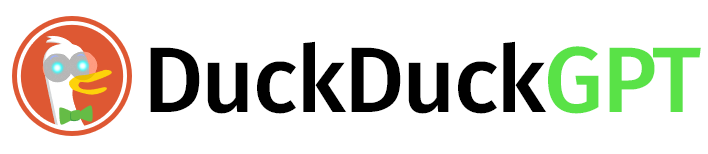
<style>
.page{position:relative;width:708px;height:154px;background:#ffffff}
.page>*{position:absolute;margin:0}
.t1{font:93px "FiraSans-Medium";letter-spacing:-0.02em;color:#000000}
.t2{font:93px "FiraSans-Medium";letter-spacing:-0.02em;color:#59e247}
</style>
<div class="page">
<p class="t1" style="left:150px;top:41px;width:551px;height:73px">DuckDuck<span class="t2">GPT</span></p>
</div>
